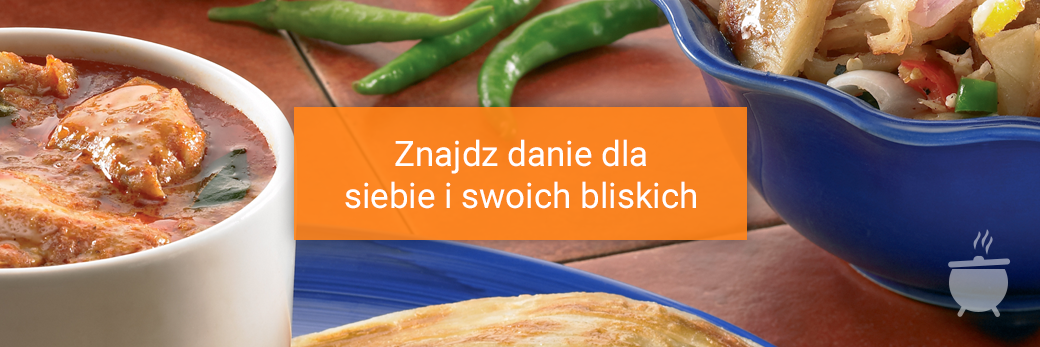
<style>
.page{position:relative;width:1040px;height:347px}
.page>*{position:absolute;margin:0}
.t1{font:35px "Roboto-Regular";color:#ffffff}
</style>
<div class="page">
<p class="t1" style="left:345px;top:139px;width:351px;height:70px;text-align:center">Znajdz danie dla<br>siebie i swoich bliskich</p>
</div>
